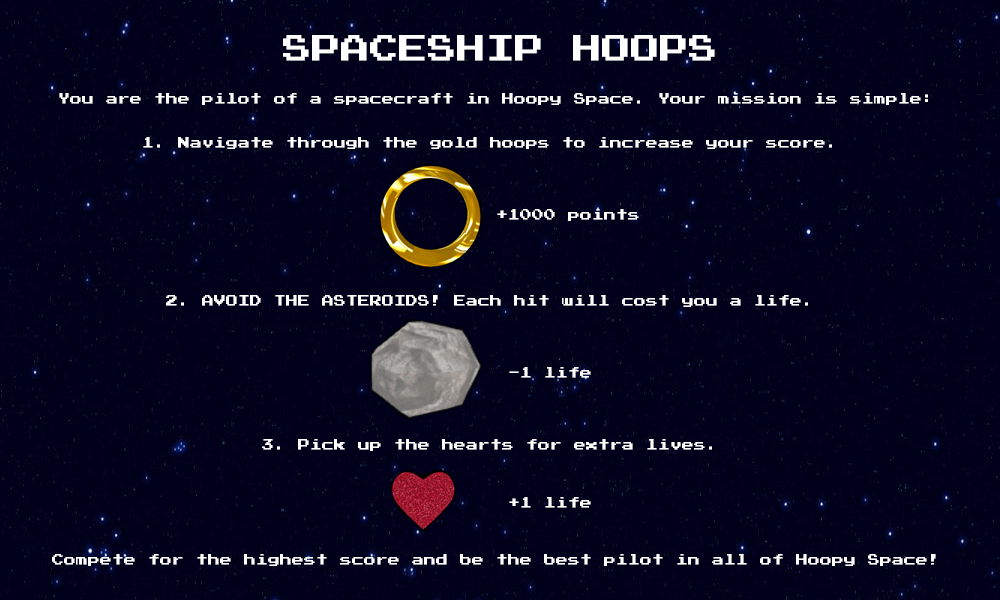
<style>
.page{position:relative;width:1000px;height:600px;background:#00001a}
.page>*{position:absolute;margin:0}
.t1{font:29px "PressStart2P";color:#ffffff}
.t2{font:12px "PressStart2P";color:#ffffff}
</style>
<div class="page">
<p class="t1" style="left:283px;top:35px;width:432px;height:26px">SPACESHIP HOOPS</p>
<p class="t2" style="left:52px;top:93px;width:884px;height:473px;text-align:center">You are the pilot of a spacecraft in Hoopy Space. Your mission is simple:<br> <br><br>1. Navigate through the gold hoops to increase your score. <br><br><br><br>  <br>    +1000 points<br><br><br><br><br><br>2. AVOID THE ASTEROIDS! Each hit will cost you a life. <br><br><br><br><br>   -1 life<br><br><br><br><br>3. Pick up the hearts for extra lives. <br><br><br> <br>   +1 life<br><br><br><br>Compete for the highest score and be the best pilot in all of Hoopy Space!</p>
</div>
